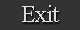
<style>
.page{position:relative;width:80px;height:30px;background:#333333}
.page>*{position:absolute;margin:0}
.t1{font:24px "TimesNewRomanPSMT";letter-spacing:-0.04em;color:#dddddd}
</style>
<div class="page">
<p class="t1" style="left:22px;top:5px;width:37px;height:17px">Exit</p>
</div>
